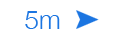
<style>
.page{position:relative;width:120px;height:40px;background:#ffffff}
.page>*{position:absolute;margin:0}
.t1{font:26px "HelveticaNeue-Light";color:#1b75e1}
</style>
<div class="page">
<p class="t1" style="left:25px;top:11px;width:35px;height:18px">5m</p>
</div>
